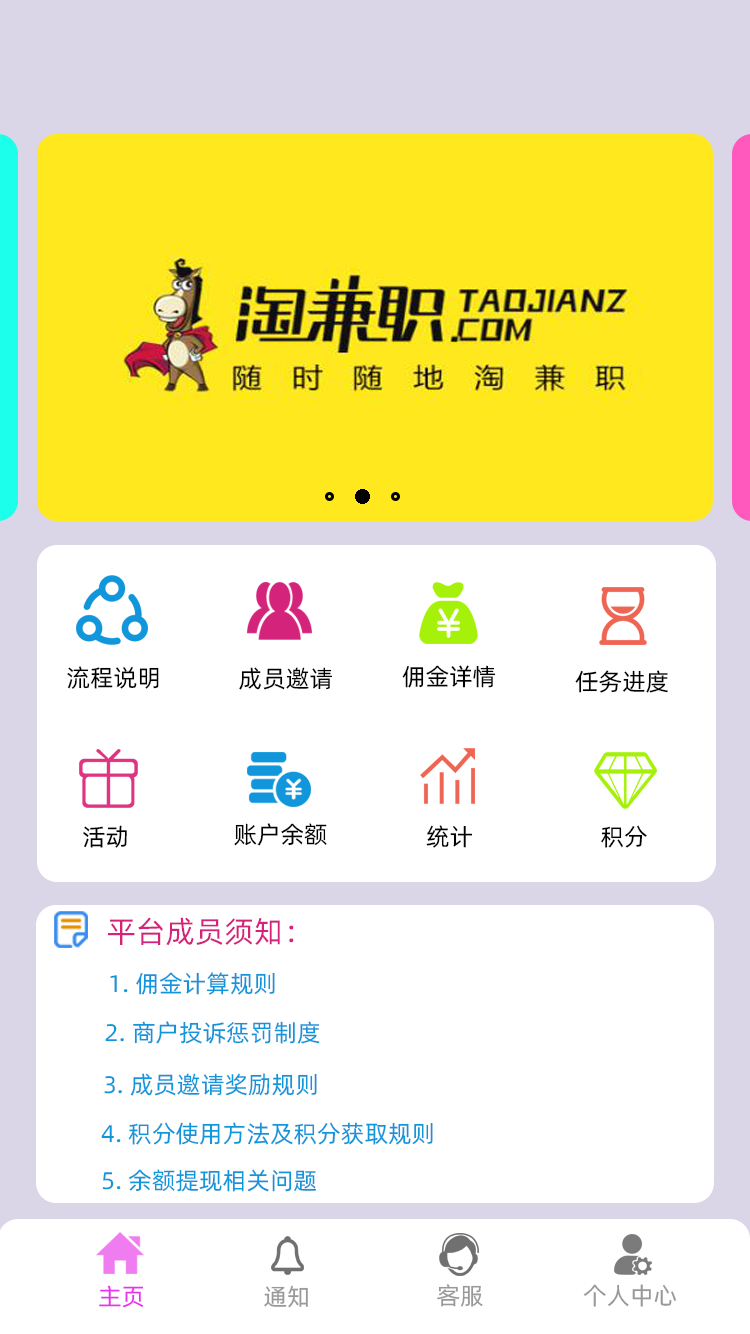
<style>
.page{position:relative;width:750px;height:1334px;background:#ffffff}
.page>*{position:absolute;margin:0}
.t1{font:24px "AlibabaPuHuiTi-Regular";color:#000000}
.t2{font:24px "AlibabaPuHuiTi-Regular";color:#010001}
.t3{font:30px "AlibabaPuHuiTi-Regular";color:#d4237a}
.t4{font:24px "AlibabaPuHuiTi-Regular";color:#1296db}
.t5{font:24px "AlibabaPuHuiTi-Regular";color:#e931ee}
.t6{font:24px "AlibabaPuHuiTi-Regular";color:#999999}
</style>
<div class="page">
<p class="t1" style="left:402px;top:665px;width:94px;height:23px">佣金详情</p>
<p class="t2" style="left:67px;top:666px;width:92px;height:23px">流程说明</p>
<p class="t1" style="left:239px;top:667px;width:94px;height:23px">成员邀请</p>
<p class="t1" style="left:575px;top:670px;width:93px;height:23px">任务进度</p>
<p class="t1" style="left:83px;top:825px;width:44px;height:23px">活动</p>
<p class="t1" style="left:234px;top:823px;width:93px;height:23px">账户余额</p>
<p class="t1" style="left:426px;top:825px;width:47px;height:23px">统计</p>
<p class="t1" style="left:601px;top:825px;width:46px;height:23px">积分</p>
<p class="t3" style="left:108px;top:917px;width:186px;height:29px">平台成员须知：</p>
<p class="t4" style="left:110px;top:972px;width:165px;height:23px">1. 佣金计算规则</p>
<p class="t4" style="left:105px;top:1021px;width:215px;height:23px">2. 商户投诉惩罚制度</p>
<p class="t4" style="left:104px;top:1073px;width:213px;height:23px">3. 成员邀请奖励规则</p>
<p class="t4" style="left:101px;top:1122px;width:332px;height:23px">4. 积分使用方法及积分获取规则</p>
<p class="t4" style="left:102px;top:1169px;width:215px;height:23px">5. 余额提现相关问题</p>
<p class="t5" style="left:99px;top:1285px;width:45px;height:23px">主页</p>
<p class="t6" style="left:264px;top:1285px;width:44px;height:23px">通知</p>
<p class="t6" style="left:437px;top:1284px;width:46px;height:23px">客服</p>
<p class="t6" style="left:583px;top:1284px;width:93px;height:23px">个人中心</p>
</div>
